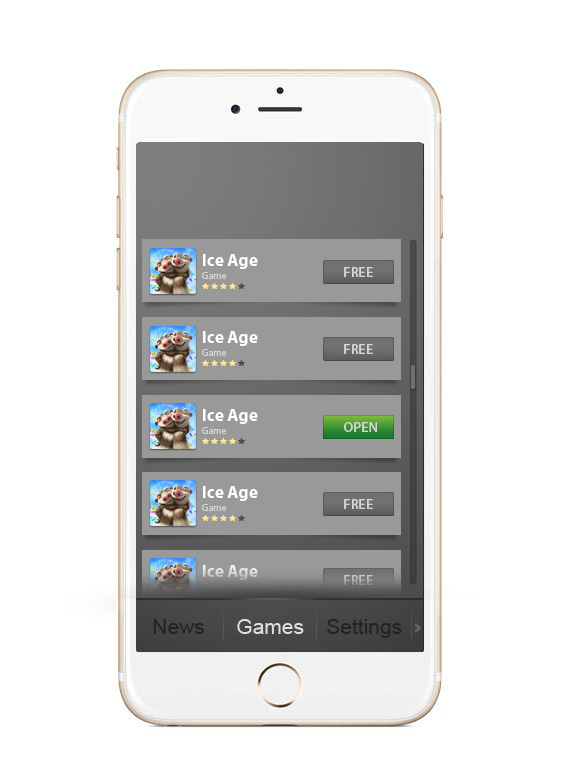
<style>
.page{position:relative;width:567px;height:783px;background:#ffffff}
.page>*{position:absolute;margin:0}
.t1{font:17.2px "MyriadPro-Bold";color:#ffffff}
.t2{font:14px "MyriadPro-Semibold";color:#d6d6d6}
.t3{font:10px "MyriadPro-Regular";color:#d6d6d6}
.t4{font:21px "ArialMT";color:#232323}
.t5{font:21px "ArialMT";color:#dfdfdf}
</style>
<div class="page">
<p class="t1" style="left:203px;top:254px;width:55px;height:15px">Ice Age</p>
<p class="t2" style="left:344px;top:267px;width:29px;height:10px">FREE</p>
<p class="t3" style="left:202px;top:272px;width:25px;height:7px">Game</p>
<p class="t1" style="left:203px;top:331px;width:55px;height:15px">Ice Age</p>
<p class="t3" style="left:202px;top:349px;width:25px;height:7px">Game</p>
<p class="t2" style="left:344px;top:344px;width:29px;height:10px">FREE</p>
<p class="t1" style="left:203px;top:409px;width:55px;height:15px">Ice Age</p>
<p class="t2" style="left:344px;top:422px;width:33px;height:10px">OPEN</p>
<p class="t3" style="left:202px;top:427px;width:25px;height:7px">Game</p>
<p class="t1" style="left:203px;top:486px;width:55px;height:15px">Ice Age</p>
<p class="t3" style="left:202px;top:504px;width:25px;height:7px">Game</p>
<p class="t2" style="left:344px;top:499px;width:29px;height:10px">FREE</p>
<p class="t4" style="left:153px;top:619px;width:52px;height:15px">News</p>
<p class="t5" style="left:237px;top:619px;width:67px;height:15px">Games</p>
<p class="t4" style="left:327px;top:619px;width:75px;height:19px">Settings</p>
</div>
